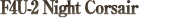
<style>
.page{position:relative;width:178px;height:18px;background:#ffffff}
.page>*{position:absolute;margin:0}
.t1{font:18px "RyuminPro-ExBold";letter-spacing:-0.08em;color:#4a3f32;font-weight:bold;scale:0.9 1}
</style>
<div class="page">
<p class="t1" style="left:0px;top:0px;width:139px;height:18px">F4U-2 Night Corsair</p>
</div>
